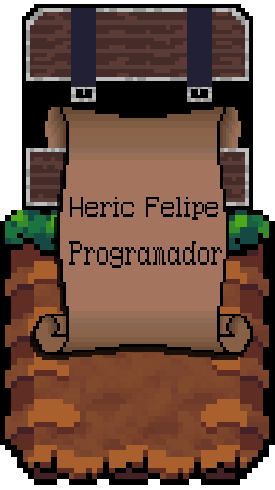
<style>
.page{position:relative;width:275px;height:490px}
.page>*{position:absolute;margin:0}
.t1{font:23px "Epson-Pixeled";color:#000000}
.t2{font:27px "Epson-Pixeled";color:#000000;scale:0.83 1}
</style>
<div class="page">
<p class="t1" style="left:70px;top:197px;width:148px;height:23px">Heric Felipe</p>
<p class="t2" style="left:69px;top:241px;width:153px;height:27px">Programador</p>
</div>
